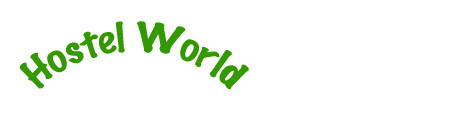
<style>
.page{position:relative;width:456px;height:138px;background:#ffffff}
.page>*{position:absolute;margin:0}
.t1{font:36px "MarkerFelt-Thin";color:#339900}
</style>
<div class="page">
<p class="t1" style="left:19px;top:21px;width:230px;height:69px">Hostel World</p>
</div>
